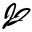
<style>
.page{position:relative;width:32px;height:32px;background:#ffffff}
.page>*{position:absolute;margin:0}
.t1{font:39.7px "BrushScriptMT";color:#000000;font-variant:small-caps}
.t2{font:39.9px "BrushScriptMT";color:#000000;font-variant:small-caps}
</style>
<div class="page">
<p class="t1" style="left:2px;top:3px;width:15px;height:26px">j</p>
<p class="t2" style="left:7px;top:7px;width:24px;height:19px;rotate:27deg">j</p>
</div>
